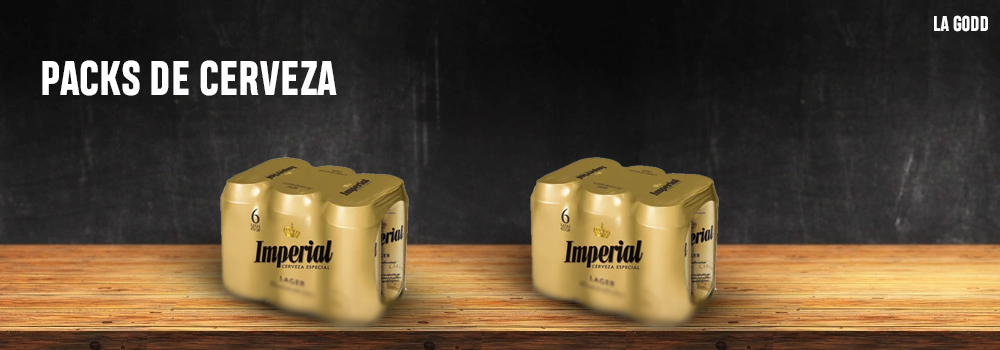
<style>
.page{position:relative;width:1000px;height:350px}
.page>*{position:absolute;margin:0}
.t1{font:20.2px "HeadingProTrial-ExtraBold";color:#fefefe;text-transform:uppercase}
.t2{font:45.7px "HeadingProTrial-ExtraBold";color:#fefefe;text-transform:uppercase}
</style>
<div class="page">
<p class="t1" style="left:934px;top:15px;width:54px;height:17px">LA GODD</p>
<p class="t2" style="left:42px;top:60px;width:295px;height:36px">PACKs DE CERVEZA</p>
</div>
